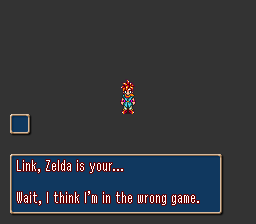
<style>
.page{position:relative;width:256px;height:224px;background:#333333}
.page>*{position:absolute;margin:0}
.t1{font:16px/16px "ReturnOfGanonReg";color:#fefefe}
</style>
<div class="page">
<p class="t1" style="left:17px;top:160px;width:182px;height:45px">Link, Zelda is your...<br><br>Wait, I think I’m in the wrong game.</p>
</div>
